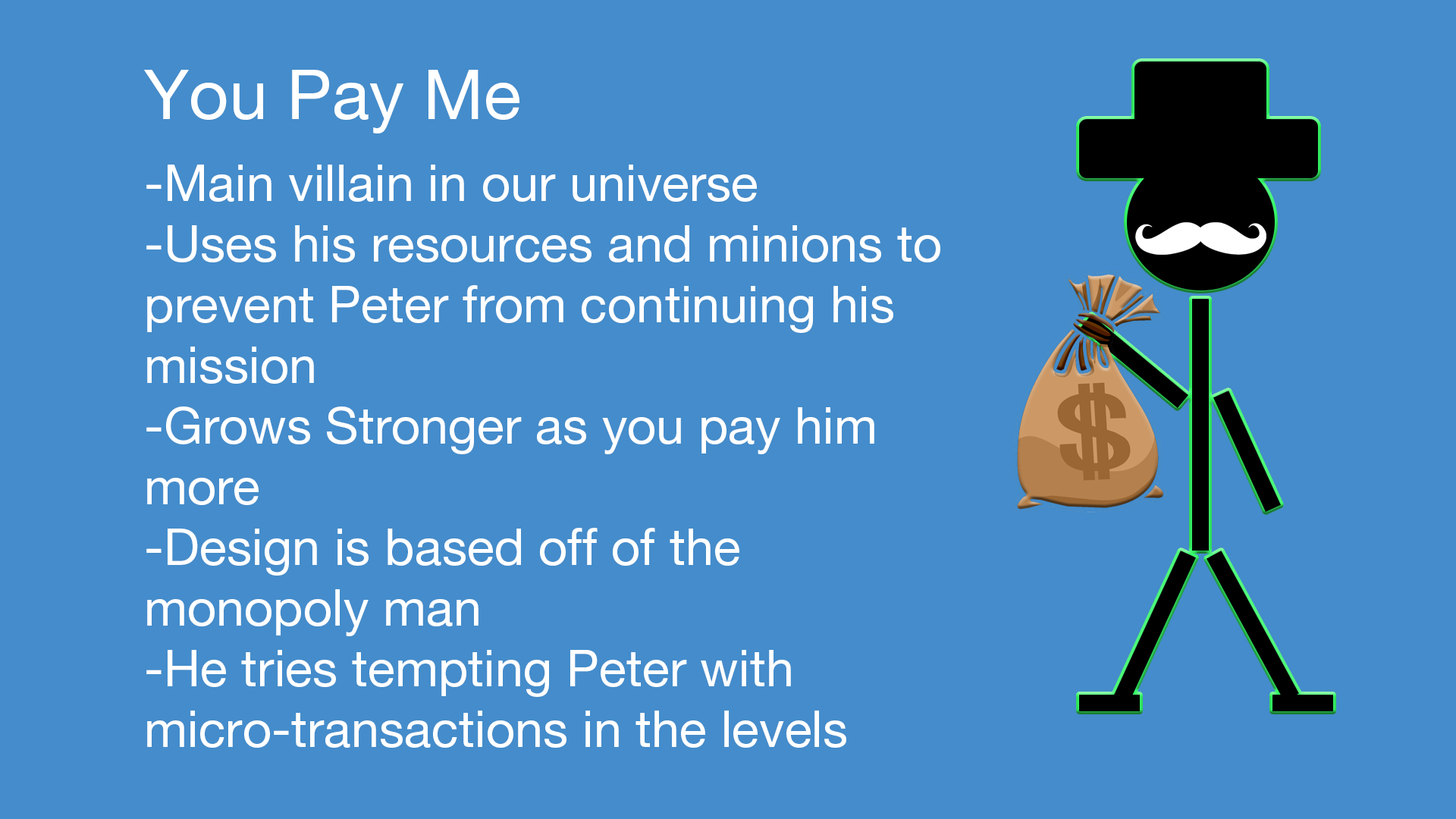
<style>
.page{position:relative;width:1456px;height:819px;background:#448ccb}
.page>*{position:absolute;margin:0}
.t1{font:69.5px "HelveticaNeueLTPro-Roman";color:#feffff}
.t2{font:50.6px "HelveticaNeueLTPro-Roman";color:#ffffff}
</style>
<div class="page">
<p class="t1" style="left:144px;top:70px;width:375px;height:63px">You Pay Me</p>
<p class="t2" style="left:146px;top:165px;width:794px;height:583px">-Main villain in our universe<br>-Uses his resources and minions to prevent Peter from continuing his mission<br>-Grows Stronger as you pay him more<br>-Design is based off of the<br>monopoly man<br>-He tries tempting Peter with<br>micro-transactions in the levels</p>
</div>
